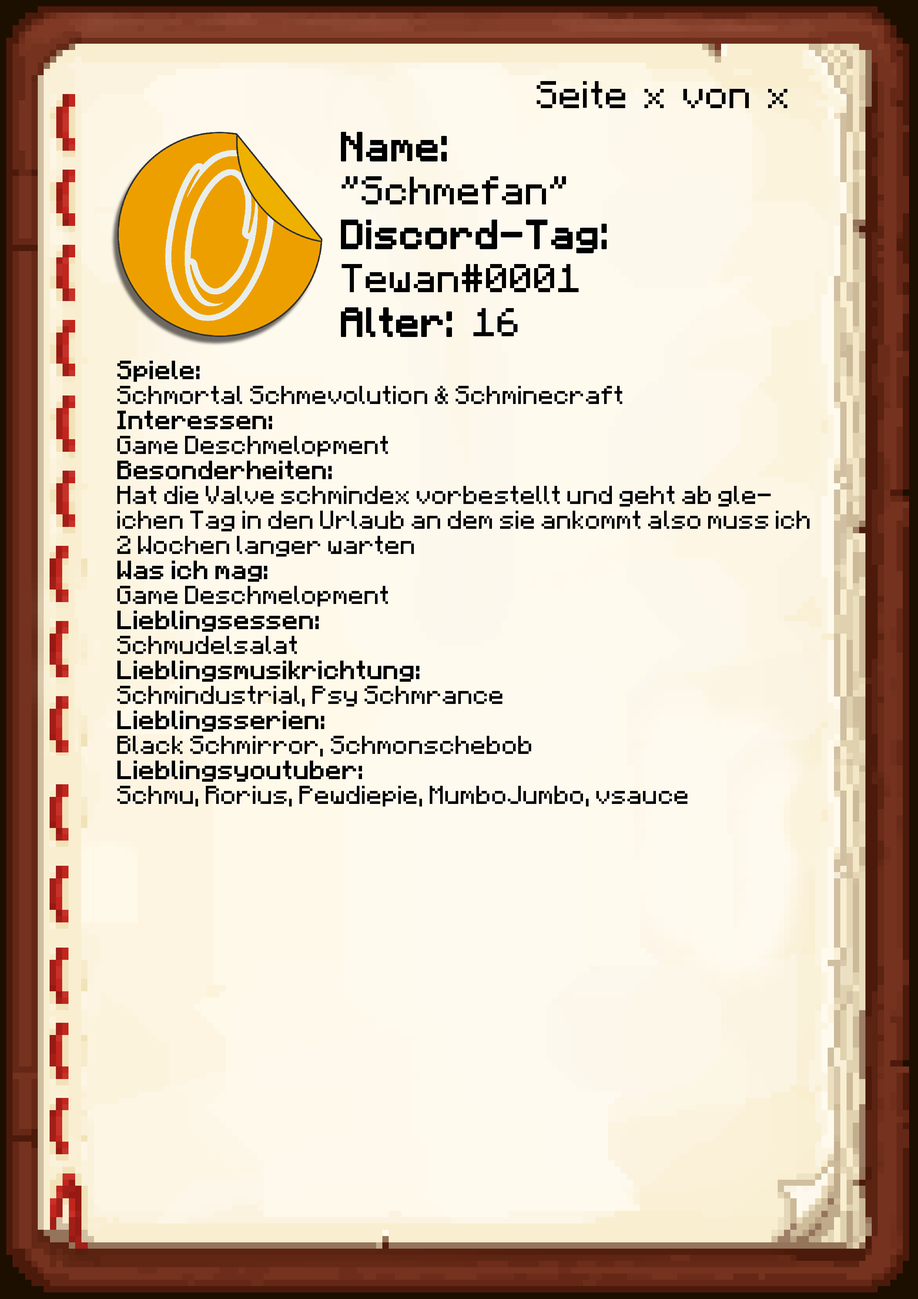
<style>
.page{position:relative;width:918px;height:1299px}
.page>*{position:absolute;margin:0}
.t1{font:38.6px "Minecraft-Regular";color:#000000}
.t2{font:40.1px/43.9px "Minecraft-Regular";color:#000000;font-weight:bold}
.t3{font:40.1px/43.9px "Minecraft-Regular";color:#000000}
.t4{font:20.8px "Minecraft";color:#000000}
.t5{font:20.8px "Minecraft";color:#000000;font-weight:bold}
</style>
<div class="page">
<p class="t1" style="left:537px;top:81px;width:250px;height:27px">Seite x von x</p>
<p class="t2" style="left:341px;top:132px;width:266px;height:205px">Name:<br><span class="t3">"Schmefan"<br></span>Discord-Tag:<br><span class="t3">Tewan#0001<br></span>Alter: <span class="t3">16</span></p>
<p class="t4" style="left:117px;top:361px;width:693px;height:445px"><span class="t5">Spiele: <br></span>Schmortal Schmevolution &amp; Schminecraft<br><span class="t5">Interessen:<br></span>Game Deschmelopment<br><span class="t5">Besonderheiten:<br></span>Hat die Valve schmindex vorbestellt und geht ab gleichen Tag in den Urlaub an dem sie ankommt also muss ich 2 Wochen langer warten<br><span class="t5">Was ich mag:<br></span>Game Deschmelopment<br><span class="t5">Lieblingsessen:<br></span>Schmudelsalat<br><span class="t5">Lieblingsmusikrichtung:<br></span>Schmindustrial, Psy Schmrance<br><span class="t5">Lieblingsserien:<br></span>Black Schmirror, Schmonschebob<br><span class="t5">Lieblingsyoutuber:<br></span>Schmu, Rorius, Pewdiepie, MumboJumbo, vsauce</p>
</div>
